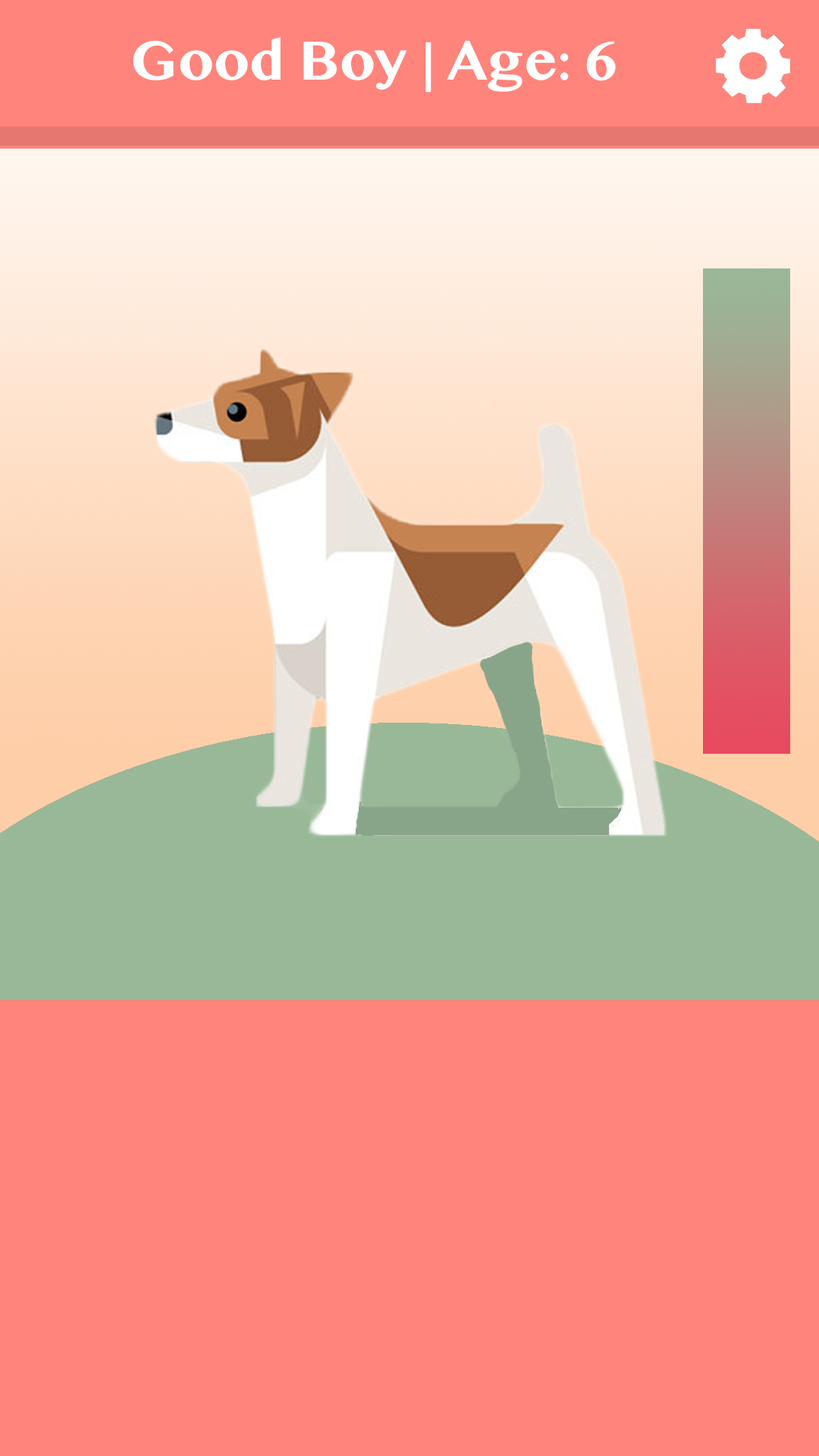
<style>
.page{position:relative;width:819px;height:1456px;background:#ff847c}
.page>*{position:absolute;margin:0}
.t1{font:54.6px "TamilMN-Bold";color:#ffffff}
</style>
<div class="page">
<p class="t1" style="left:133px;top:37px;width:483px;height:56px">Good Boy | Age: 6</p>
</div>
